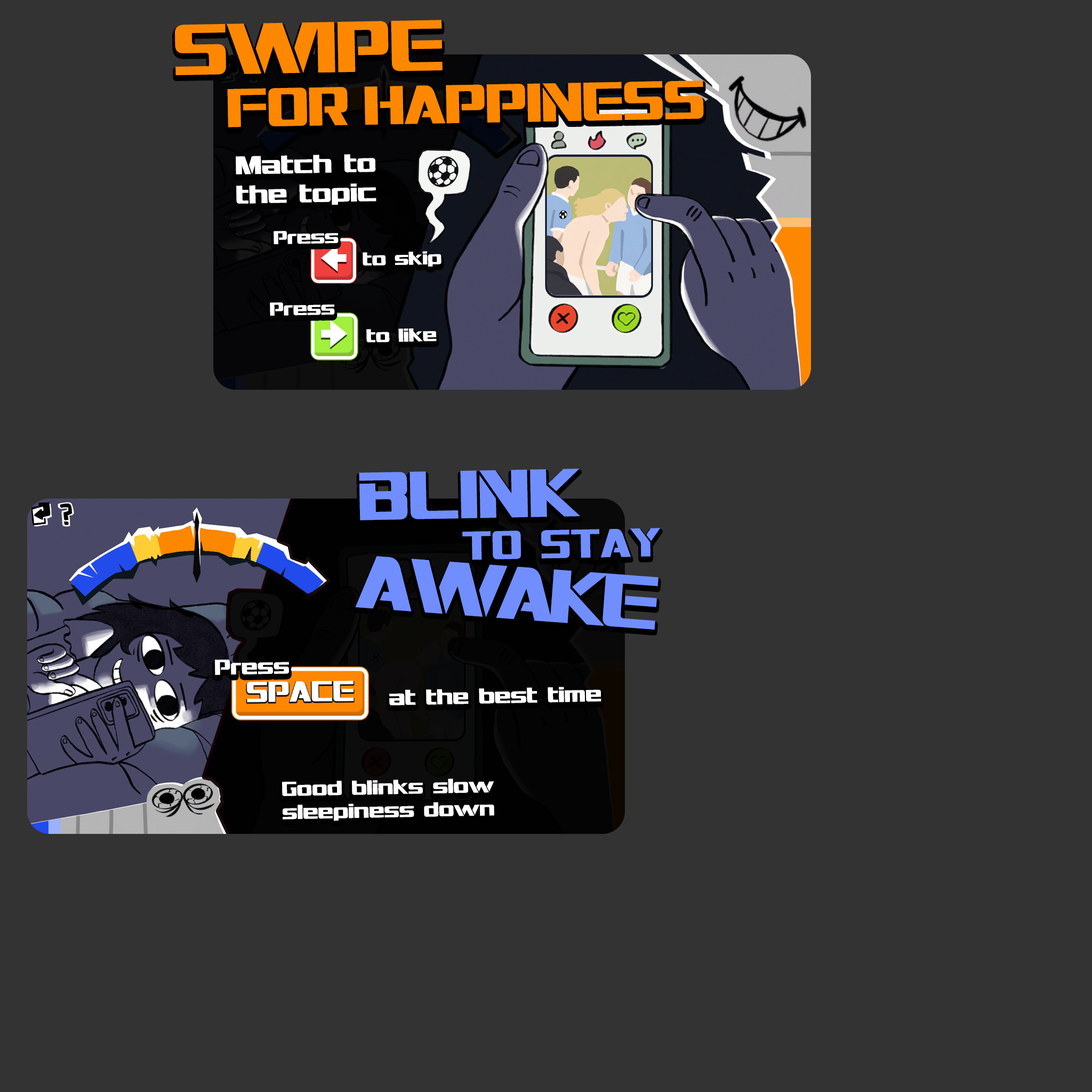
<style>
.page{position:relative;width:1092px;height:1092px;background:#333333}
.page>*{position:absolute;margin:0}
.t1{font:68.6px "Interceptor";color:#fd8800}
.t2{font:52px "Interceptor";color:#fd8800}
.t3{font:24.4px "Interceptor";color:#ffffff}
.t4{font:17.8px "Interceptor";color:#ffffff}
.t5{font:64.7px "Interceptor";color:#718eff}
.t6{font:38.3px "Interceptor";color:#718eff}
.t7{font:71.3px "Interceptor";letter-spacing:-0.05em;color:#718eff}
.t8{font:20.5px "Interceptor";color:#ffffff}
.t9{font:19.3px "Interceptor";color:#ffffff}
</style>
<div class="page">
<p class="t1" style="left:175px;top:20px;width:268px;height:55px;rotate:-1deg">SWIPE</p>
<p class="t2" style="left:227px;top:87px;width:121px;height:40px;rotate:-1deg">FOR</p>
<p class="t2" style="left:364px;top:81px;width:340px;height:44px;rotate:-1deg">HAPPINESS</p>
<p class="t3" style="left:236px;top:154px;width:140px;height:51px;rotate:-1deg">Match to <br>the topic</p>
<p class="t4" style="left:274px;top:231px;width:65px;height:13px;rotate:-1deg">Press</p>
<p class="t4" style="left:363px;top:251px;width:78px;height:16px;rotate:-1deg">to skip</p>
<p class="t4" style="left:270px;top:302px;width:65px;height:14px;rotate:-1deg">Press</p>
<p class="t4" style="left:366px;top:328px;width:71px;height:14px;rotate:-1deg">to like</p>
<p class="t5" style="left:359px;top:469px;width:221px;height:51px;rotate:-1deg">BLINK</p>
<p class="t6" style="left:462px;top:528px;width:199px;height:32px;rotate:-1deg">TO STAY</p>
<p class="t7" style="left:355px;top:556px;width:303px;height:74px;rotate:4deg">AWAKE</p>
<p class="t8" style="left:215px;top:660px;width:74px;height:15px;rotate:-1deg">Press</p>
<p class="t8" style="left:389px;top:687px;width:212px;height:18px;rotate:-1deg">at the best time</p>
<p class="t9" style="left:282px;top:778px;width:212px;height:43px;rotate:-1deg">Good blinks slow<br>sleepiness down</p>
</div>
